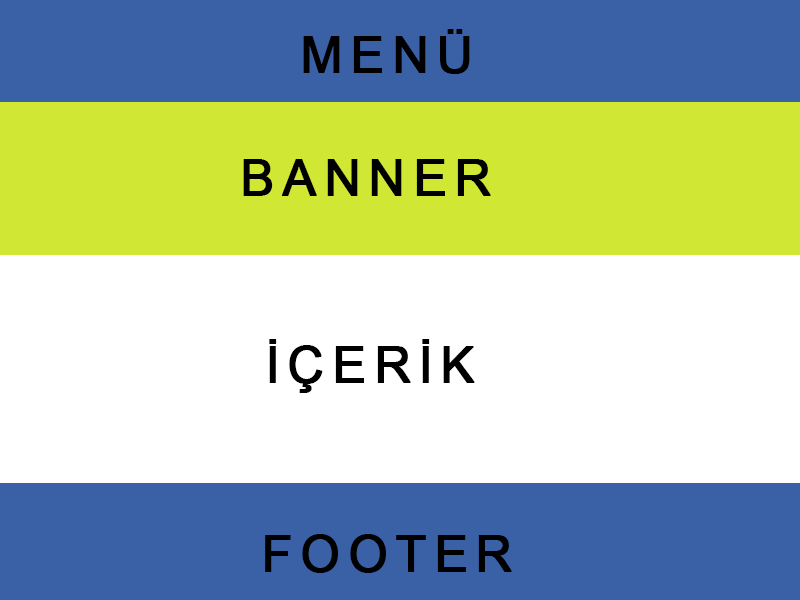
<style>
.page{position:relative;width:800px;height:600px;background:#ffffff}
.page>*{position:absolute;margin:0}
.t1{font:50px "ArialMT";letter-spacing:0.14em;color:#000000;font-weight:bold}
</style>
<div class="page">
<p class="t1" style="left:303px;top:29px;width:167px;height:45px">MENÜ</p>
<p class="t1" style="left:243px;top:159px;width:248px;height:37px">BANNER</p>
<p class="t1" style="left:269px;top:339px;width:206px;height:54px">İÇERİK</p>
<p class="t1" style="left:265px;top:534px;width:247px;height:39px">FOOTER</p>
</div>
